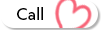
<style>
.page{position:relative;width:101px;height:30px;background:#ffffff}
.page>*{position:absolute;margin:0}
.t1{font:18px "QuietSans-Regular";color:#000000}
</style>
<div class="page">
<p class="t1" style="left:17px;top:7px;width:26px;height:13px">Call</p>
</div>
